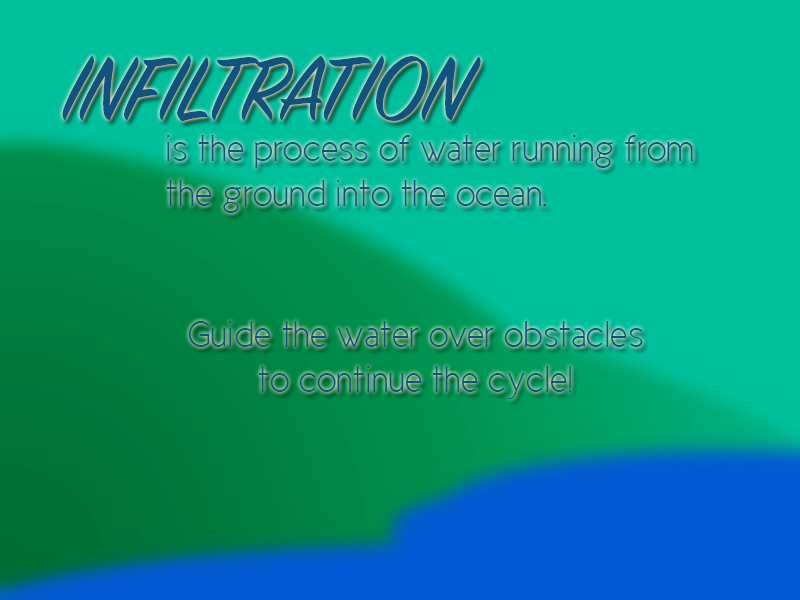
<style>
.page{position:relative;width:800px;height:600px;background:#00c09c}
.page>*{position:absolute;margin:0}
.t1{font:100px "SignPainter-HouseScript";color:#12527e}
.t2{font:37.5px "CicleFina";color:#12527e}
</style>
<div class="page">
<p class="t1" style="left:62px;top:56px;width:419px;height:65px">INFILTRATION</p>
<p class="t2" style="left:166px;top:135px;width:527px;height:78px">is the process of water running from <br>the ground into the ocean.</p>
<p class="t2" style="left:188px;top:321px;width:455px;height:78px;text-align:center">Guide the water over obstacles<br>to continue the cycle!</p>
</div>
